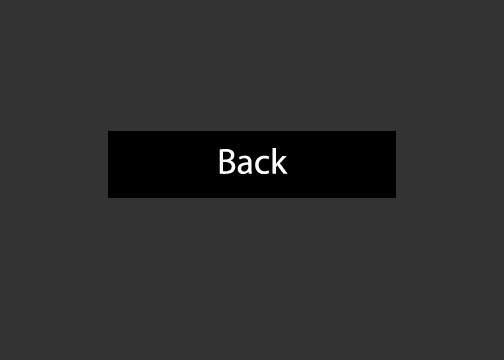
<style>
.page{position:relative;width:504px;height:360px;background:#333333}
.page>*{position:absolute;margin:0}
.t1{font:36px "MyriadPro-Regular";color:#ffffff}
</style>
<div class="page">
<p class="t1" style="left:219px;top:148px;width:69px;height:26px">Back</p>
</div>
